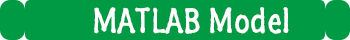
<style>
.page{position:relative;width:350px;height:40px;background:#009944}
.page>*{position:absolute;margin:0}
.t1{font:36px "SegoeMarker";color:#ffffff}
</style>
<div class="page">
<p class="t1" style="left:94px;top:7px;width:195px;height:27px">MATLAB Model</p>
</div>
